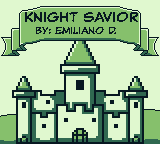
<style>
.page{position:relative;width:160px;height:144px;background:#e0f8cf}
.page>*{position:absolute;margin:0}
.t1{font:10px "ClassicComic";color:#071821}
.t2{font:14px "ClassicComic";color:#071821}
</style>
<div class="page">
<p class="t1" style="left:25px;top:12px;width:113px;height:22px"><span class="t2">Knight Savior<br></span>   by: Emiliano D.</p>
</div>
